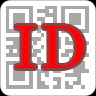
<style>
.page{position:relative;width:96px;height:96px;background:#ffffff}
.page>*{position:absolute;margin:0}
.t1{font:60px "Georgia";letter-spacing:0.05em;color:#fe0006}
</style>
<div class="page">
<p class="t1" style="left:16px;top:26px;width:68px;height:42px">ID</p>
</div>
